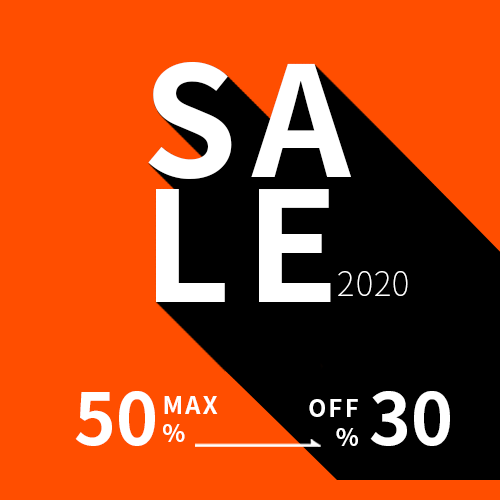
<style>
.page{position:relative;width:500px;height:500px;background:#ff4e00}
.page>*{position:absolute;margin:0}
.t1{font:153.2px/125px "NotoSansKR-Bold";letter-spacing:0.1em;color:#ffffff}
.t2{font:33.3px "NotoSansKR-Thin";letter-spacing:0.025em;color:#ffffff}
.t3{font:71.3px "NotoSansKR-Bold";color:#ffffff}
.t4{font:71.3px "NotoSansKR-Bold";letter-spacing:-0.1em;color:#ffffff}
.t5{font:23.8px "NotoSansKR-Bold";letter-spacing:0.1em;color:#ffffff}
</style>
<div class="page">
<p class="t1" style="left:148px;top:61px;width:203px;height:241px">SA<br>LE</p>
<p class="t2" style="left:338px;top:271px;width:70px;height:25px">2020</p>
<p class="t3" style="left:75px;top:391px;width:80px;height:55px">5<span class="t4">0</span></p>
<p class="t5" style="left:163px;top:396px;width:55px;height:46px">MAX<br>%</p>
<p class="t5" style="left:309px;top:399px;width:49px;height:47px;text-align:right">OFF<br>%</p>
<p class="t3" style="left:370px;top:391px;width:80px;height:55px">3<span class="t4">0</span></p>
</div>
